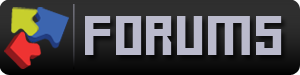
<style>
.page{position:relative;width:300px;height:75px}
.page>*{position:absolute;margin:0}
.t1{font:52px "Tigre";color:#babacc;scale:1.29 1}
</style>
<div class="page">
<p class="t1" style="left:85px;top:16px;width:197px;height:39px">forums</p>
</div>
